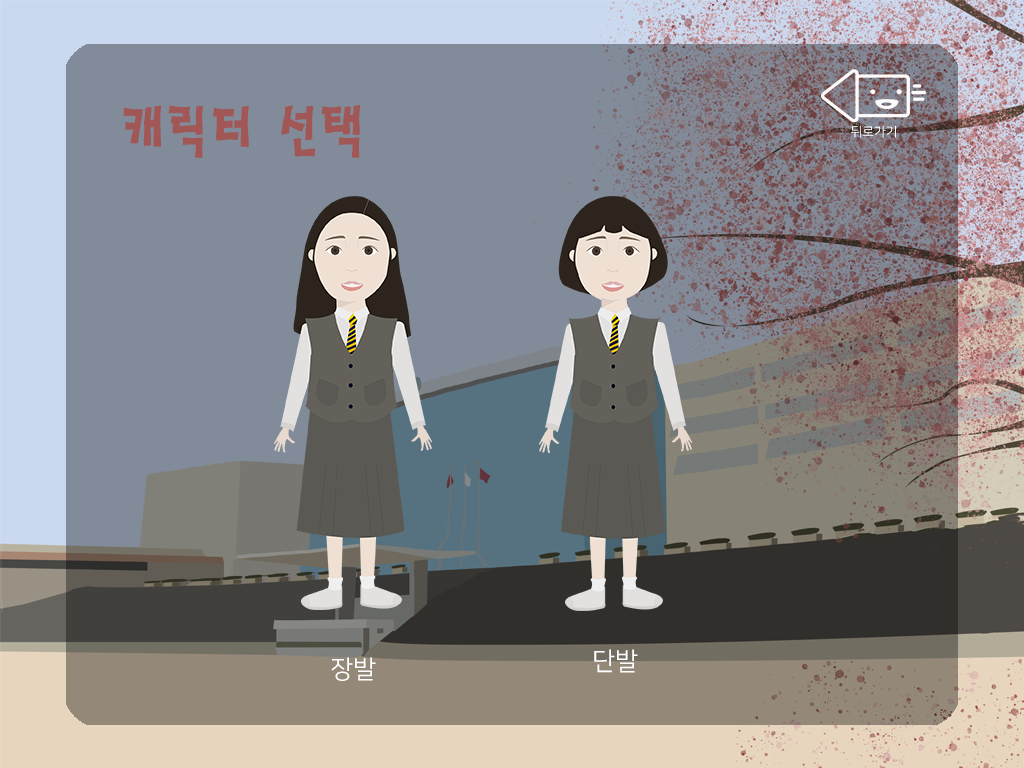
<style>
.page{position:relative;width:1024px;height:768px;background:#818b99}
.page>*{position:absolute;margin:0}
.t1{font:62.1px "HaanSaleB";color:#a15756;scale:0.9 1}
.t2{font:12.9px "NanumSquareOTFR";color:#ffffff}
.t3{font:25px "NanumSquareOTFR";color:#ffffff}
</style>
<div class="page">
<p class="t1" style="left:123px;top:105px;width:238px;height:53px">캐릭터 선택</p>
<p class="t2" style="left:851px;top:125px;width:45px;height:13px">뒤로가기</p>
<p class="t3" style="left:594px;top:649px;width:44px;height:24px">단발</p>
<p class="t3" style="left:331px;top:657px;width:45px;height:24px">장발</p>
</div>
